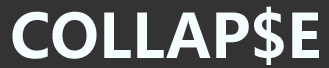
<style>
.page{position:relative;width:329px;height:68px;background:#333333}
.page>*{position:absolute;margin:0}
.t1{font:60px "MicrosoftYaHei-Bold";color:#f5feff}
</style>
<div class="page">
<p class="t1" style="left:12px;top:6px;width:307px;height:59px">COLLAP$E</p>
</div>
